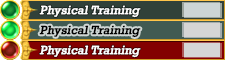
<style>
.page{position:relative;width:225px;height:60px}
.page>*{position:absolute;margin:0}
.t1{font:12px "Rockwell";color:#ffffff;font-weight:bold;font-style:italic}
.t2{font:12px "Rockwell";color:#000000;font-weight:bold;font-style:italic}
</style>
<div class="page">
<p class="t1" style="left:39px;top:5px;width:102px;height:13px">Physical Training</p>
<p class="t2" style="left:39px;top:25px;width:102px;height:13px">Physical Training</p>
<p class="t1" style="left:39px;top:45px;width:102px;height:13px">Physical Training</p>
</div>
